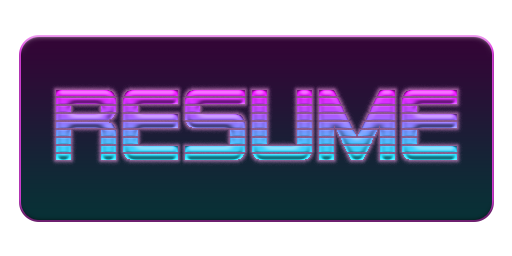
<style>
.page{position:relative;width:512px;height:256px;background:#ffffff}
.page>*{position:absolute;margin:0}
.t1{font:100px "AlienEncounters";letter-spacing:0.01em}
</style>
<div class="page">
<p class="t1" style="left:56px;top:90px;width:401px;height:70px">RESUME</p>
</div>
